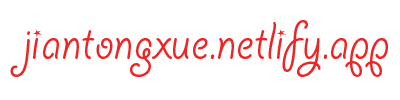
<style>
.page{position:relative;width:400px;height:100px;background:#ffffff}
.page>*{position:absolute;margin:0}
.t1{font:58.3px "GiddyupStd";color:#ec2626}
</style>
<div class="page">
<p class="t1" style="left:10px;top:20px;width:378px;height:57px">jiantongxue.netlify.app</p>
</div>
